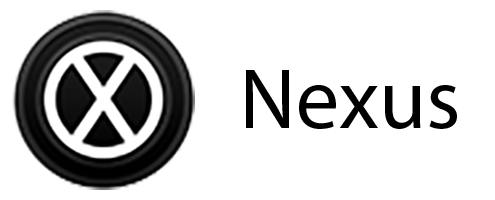
<style>
.page{position:relative;width:495px;height:200px;background:#ffffff}
.page>*{position:absolute;margin:0}
.t1{font:86.2px "MyriadPro-Regular";color:#000000}
</style>
<div class="page">
<p class="t1" style="left:246px;top:70px;width:211px;height:59px">Nexus</p>
</div>
